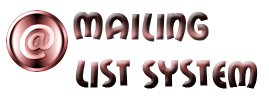
<style>
.page{position:relative;width:269px;height:100px;background:#ffffff}
.page>*{position:absolute;margin:0}
.t1{font:40px "MailRayStuff";letter-spacing:0.025em;font-weight:bold}
</style>
<div class="page">
<p class="t1" style="left:73px;top:12px;width:185px;height:77px">Mailing <br>List System</p>
</div>
